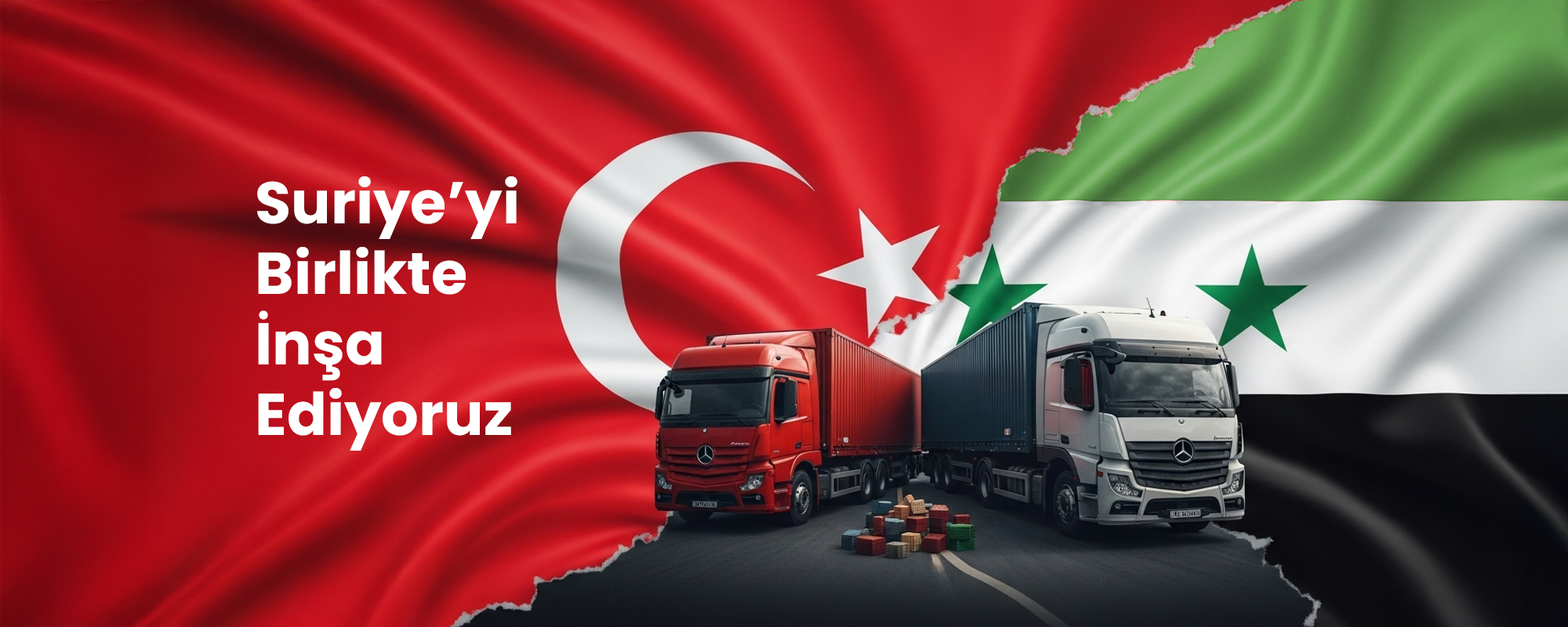
<style>
.page{position:relative;width:1568px;height:627px}
.page>*{position:absolute;margin:0}
.t1{font:58.8px "Poppins-Bold";color:#ffffff}
</style>
<div class="page">
<p class="t1" style="left:257px;top:176px;width:260px;height:275px">Suriye’yi<br>Birlikte<br>İnşa<br>Ediyoruz</p>
</div>
